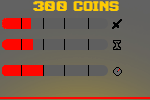
<style>
.page{position:relative;width:150px;height:100px}
.page>*{position:absolute;margin:0}
.t1{font:14px "AutomBold";color:#ffcc01}
.t2{font:16px "AutomBold";color:#ffcc01}
</style>
<div class="page">
<p class="t1" style="left:33px;top:1px;width:86px;height:10px"><span class="t2">300 </span>coins</p>
</div>
